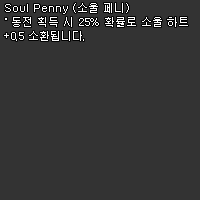
<style>
.page{position:relative;width:200px;height:200px;background:#333333}
.page>*{position:absolute;margin:0}
.t1{font:11px/14px "Dotum";color:#ffffff}
</style>
<div class="page">
<p class="t1" style="left:4px;top:3px;width:184px;height:38px">Soul Penny (소울 페니)<br>˚ 동전 획득 시 25% 확률로 소울 하트<br>+0.5 소환됩니다.</p>
</div>
